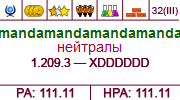
<style>
.page{position:relative;width:180px;height:100px;background:#ffffff}
.page>*{position:absolute;margin:0}
.t1{font:10px "ArialMT";color:#6e0022}
.t2{font:12px "ArialMT";color:#6e0022}
.t3{font:12px "ArialMT";color:#6e0022;font-weight:bold}
</style>
<div class="page">
<p class="t1" style="left:152px;top:7px;width:26px;height:9px">32(III)</p>
<p class="t2" style="left:31px;top:58px;width:118px;height:9px">1.209.3 — XDDDDDD</p>
<p class="t2" style="left:31px;top:58px;width:118px;height:9px">1.209.3 — XDDDDDD</p>
<p class="t3" style="left:16px;top:88px;width:58px;height:10px">РА: 111.11</p>
<p class="t3" style="left:103px;top:88px;width:67px;height:10px">НРА: 111.11</p>
</div>
